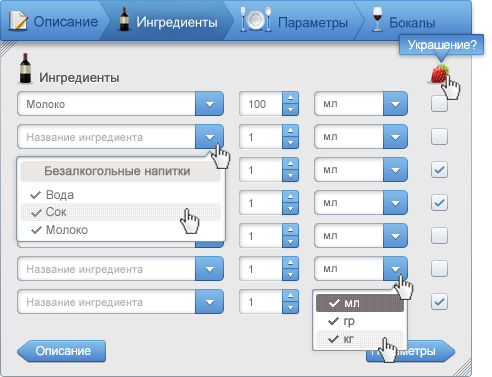
<style>
.page{position:relative;width:492px;height:377px;background:#e9e9e9}
.page>*{position:absolute;margin:0}
.t1{font:14px "ArialMT";color:#1b4680;font-weight:bold}
.t2{font:13px "ArialMT";color:#ffffff;font-weight:bold}
.t3{font:14px "ArialMT";color:#ffffff;font-weight:bold}
.t4{font:13px "ArialMT";color:#1b4680;font-weight:bold}
.t5{font:12px "ArialMT";color:#ffffff}
.t6{font:13px "ArialMT"}
.t7{font:13px "ArialMT";color:#505050}
.t8{font:11px "ArialMT";color:#6b6b6b}
.t9{font:11px "ArialMT";color:#a6acb2}
.t10{font:12px "ArialMT";color:#827a78;font-weight:bold}
.t11{font:12px "ArialMT";color:#6b6b6b}
</style>
<div class="page">
<p class="t1" style="left:34px;top:16px;width:64px;height:11px">Описание</p>
<p class="t2" style="left:137px;top:16px;width:80px;height:14px"><span class="t3">И</span>нгредиенты</p>
<p class="t4" style="left:279px;top:17px;width:69px;height:13px"><span class="t1">П</span>араметры</p>
<p class="t4" style="left:390px;top:17px;width:45px;height:11px"><span class="t1">Б</span>окалы</p>
<p class="t5" style="left:408px;top:40px;width:69px;height:12px">Украшение?</p>
<p class="t6" style="left:39px;top:73px;width:79px;height:13px">Ингредиенты</p>
<p class="t7" style="left:40px;top:72px;width:79px;height:13px">Ингредиенты</p>
<p class="t8" style="left:27px;top:100px;width:38px;height:8px">Молоко</p>
<p class="t8" style="left:249px;top:100px;width:17px;height:8px">100</p>
<p class="t8" style="left:324px;top:101px;width:13px;height:6px">мл</p>
<p class="t9" style="left:27px;top:133px;width:116px;height:11px">Название ингредиента</p>
<p class="t8" style="left:249px;top:133px;width:3px;height:8px">1</p>
<p class="t8" style="left:324px;top:134px;width:13px;height:6px">мл</p>
<p class="t10" style="left:45px;top:166px;width:145px;height:10px">Безалкогольные напитки</p>
<p class="t8" style="left:249px;top:166px;width:3px;height:8px">1</p>
<p class="t8" style="left:324px;top:167px;width:13px;height:6px">мл</p>
<p class="t11" style="left:46px;top:190px;width:28px;height:11px">Вода</p>
<p class="t11" style="left:46px;top:207px;width:21px;height:10px">Сок</p>
<p class="t8" style="left:249px;top:199px;width:3px;height:8px">1</p>
<p class="t8" style="left:324px;top:200px;width:13px;height:6px">мл</p>
<p class="t11" style="left:46px;top:225px;width:42px;height:9px">Молоко</p>
<p class="t8" style="left:249px;top:232px;width:3px;height:8px">1</p>
<p class="t8" style="left:324px;top:233px;width:13px;height:6px">мл</p>
<p class="t9" style="left:27px;top:265px;width:116px;height:11px">Название ингредиента</p>
<p class="t8" style="left:249px;top:265px;width:3px;height:8px">1</p>
<p class="t8" style="left:324px;top:266px;width:13px;height:6px">мл</p>
<p class="t9" style="left:27px;top:298px;width:116px;height:11px">Название ингредиента</p>
<p class="t8" style="left:249px;top:298px;width:3px;height:8px">1</p>
<p class="t5" style="left:345px;top:300px;width:14px;height:7px">мл</p>
<p class="t11" style="left:344px;top:318px;width:11px;height:10px">гр</p>
<p class="t11" style="left:344px;top:336px;width:10px;height:7px">кг</p>
<p class="t5" style="left:36px;top:346px;width:55px;height:10px">Описание</p>
<p class="t5" style="left:372px;top:346px;width:63px;height:12px">Параметры</p>
</div>
